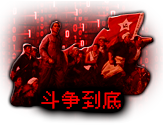
<style>
.page{position:relative;width:164px;height:140px}
.page>*{position:absolute;margin:0}
.t1{font:20.5px "HYPixel-11px-U";color:#ff0000}
</style>
<div class="page">
<p class="t1" style="left:41px;top:91px;width:80px;height:18px">斗争到底</p>
</div>
